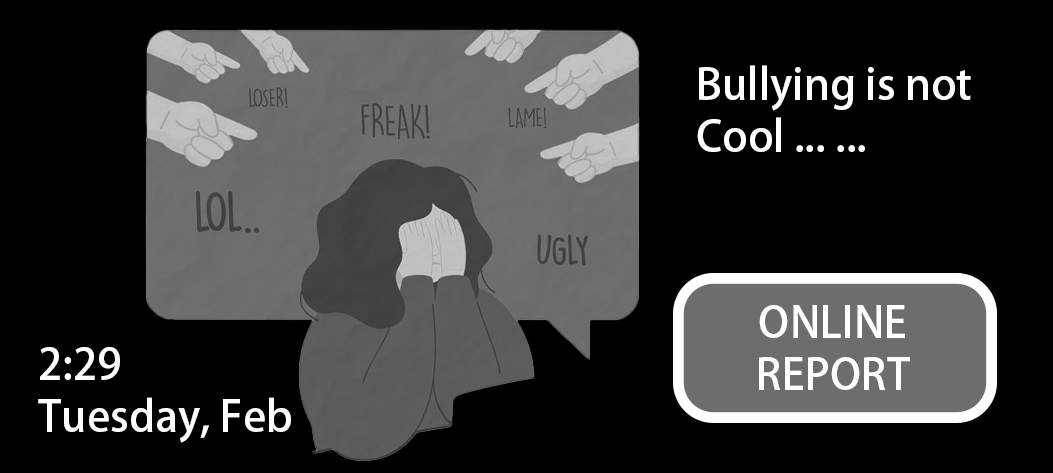
<style>
.page{position:relative;width:1053px;height:473px;background:#000000}
.page>*{position:absolute;margin:0}
.t1{font:43px "AdobeHeitiStd-Regular";color:#ffffff}
</style>
<div class="page">
<p class="t1" style="left:697px;top:65px;width:274px;height:87px">Bullying is not <br>Cool ... ...</p>
<p class="t1" style="left:759px;top:305px;width:151px;height:85px;text-align:center">ONLINE<br>REPORT</p>
<p class="t1" style="left:38px;top:347px;width:253px;height:96px">2:29<br>Tuesday, Feb</p>
</div>
